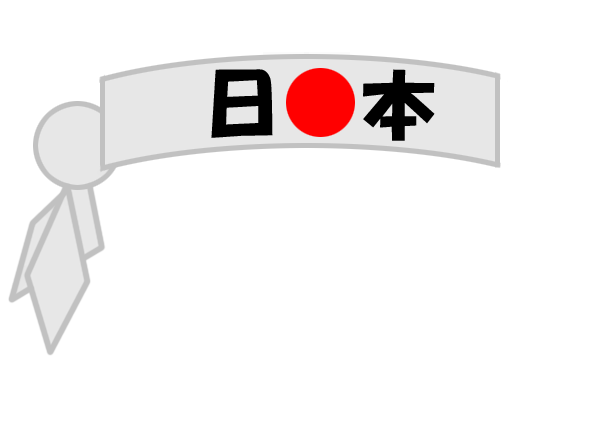
<style>
.page{position:relative;width:600px;height:443px;background:#ffffff}
.page>*{position:absolute;margin:0}
.t1{font:75px "HGPSoeiKakupoptai";color:#000000}
</style>
<div class="page">
<p class="t1" style="left:211px;top:69px;width:62px;height:69px">日</p>
<p class="t1" style="left:363px;top:69px;width:72px;height:72px">本</p>
</div>
